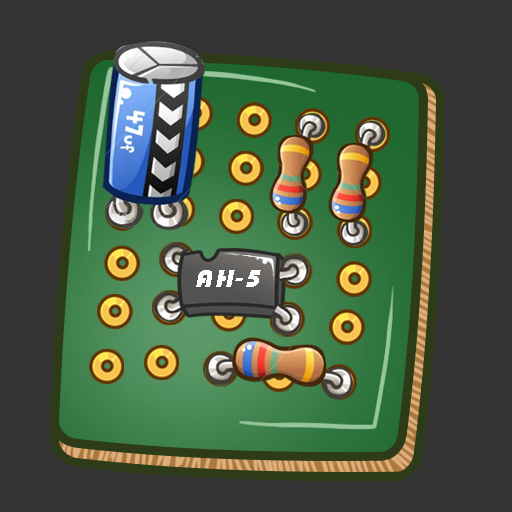
<style>
.page{position:relative;width:512px;height:512px;background:#333333}
.page>*{position:absolute;margin:0}
.t1{font:25.3px "Bauhaus93";letter-spacing:0.07em;color:#fbfdfe;font-variant:small-caps;font-style:italic;scale:1.18 1}
</style>
<div class="page">
<p class="t1" style="left:196px;top:270px;width:65px;height:17px">AH-5</p>
</div>
